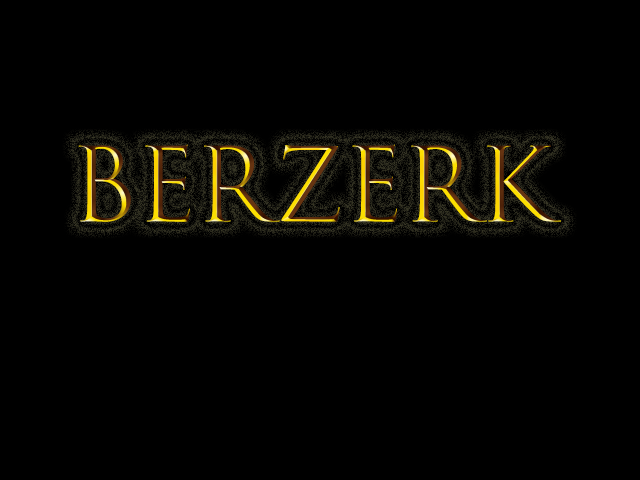
<style>
.page{position:relative;width:640px;height:480px;background:#000000}
.page>*{position:absolute;margin:0}
.t1{font:100px "TrajanColor-Concept"}
</style>
<div class="page">
<p class="t1" style="left:78px;top:144px;width:483px;height:78px">Berzerk</p>
</div>
